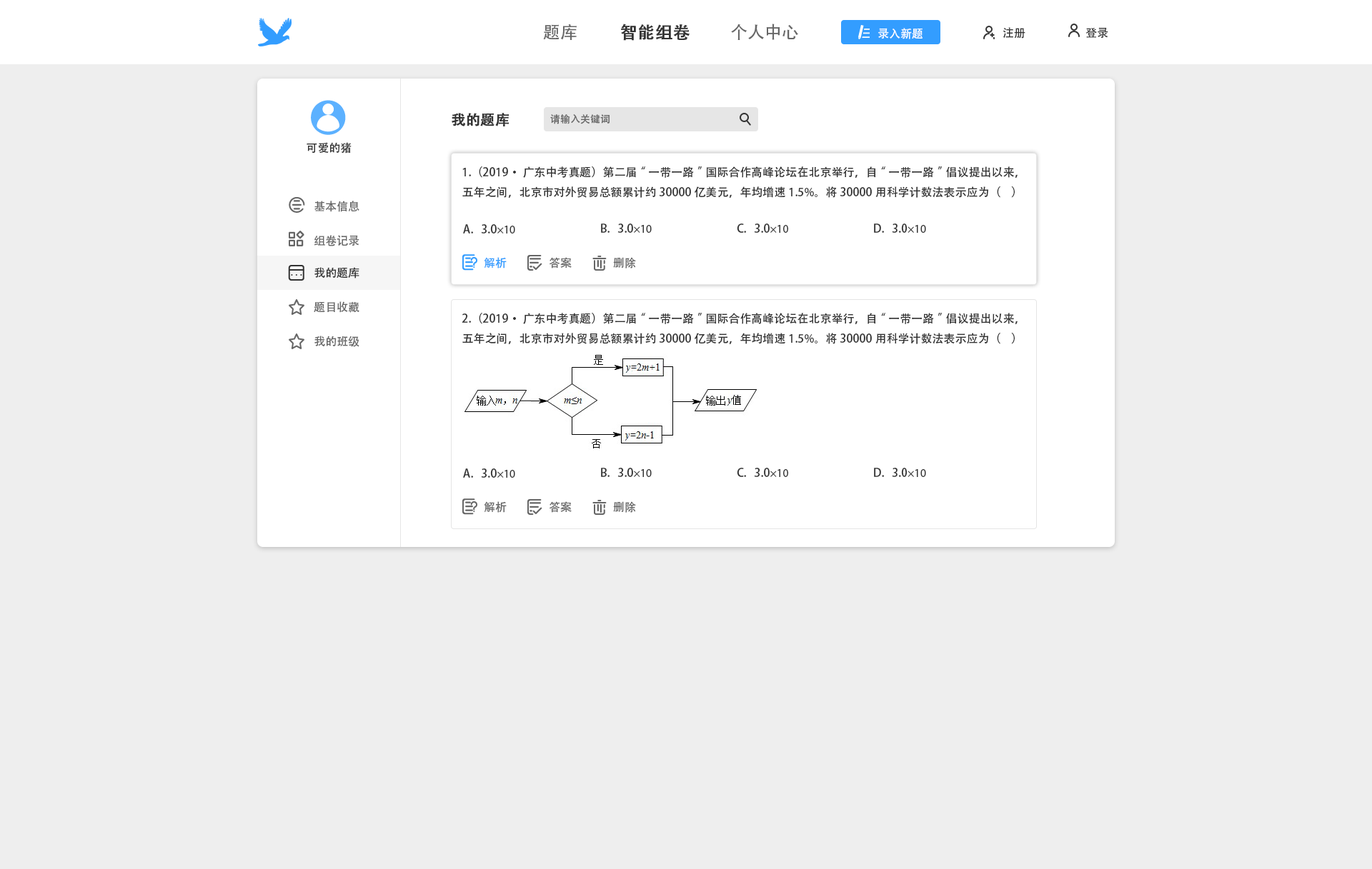
<style>
.page{position:relative;width:1372px;height:869px;background:#eeeeee}
.page>*{position:absolute;margin:0}
.t1{font:17.1px "AdobeHeitiStd-Regular";color:#666666}
.t2{font:17.1px "AdobeHeitiStd-Regular";color:#333333;font-weight:bold}
.t3{font:11.4px "AdobeHeitiStd-Regular";color:#ffffff}
.t4{font:11.4px "AdobeHeitiStd-Regular";color:#333333}
.t5{font:14.3px "AdobeHeitiStd-Regular";color:#333333;font-weight:bold}
.t6{font:10px "AdobeHeitiStd-Regular";color:#666666}
.t7{font:11.4px "AdobeHeitiStd-Regular";color:#666666}
.t8{font:11.4px "MyriadPro-Regular";color:#333333}
.t9{font:11.4px "AdobeHeitiStd-Regular";color:#339dff}
</style>
<div class="page">
<p class="t1" style="left:543px;top:24px;width:33px;height:16px">题库</p>
<p class="t2" style="left:621px;top:24px;width:68px;height:17px">智能组卷</p>
<p class="t1" style="left:731px;top:24px;width:67px;height:16px">个人中心</p>
<p class="t3" style="left:878px;top:28px;width:44px;height:11px">录入新题</p>
<p class="t4" style="left:1002px;top:27px;width:23px;height:12px">注册</p>
<p class="t4" style="left:1085px;top:27px;width:23px;height:12px">登录</p>
<p class="t5" style="left:451px;top:113px;width:58px;height:13px">我的题库</p>
<p class="t6" style="left:550px;top:114px;width:59px;height:10px">请输入关键词</p>
<p class="t4" style="left:306px;top:142px;width:45px;height:12px">可爱的猪</p>
<p class="t4" style="left:462px;top:166px;width:555px;height:32px">1.（2019·广东中考真题）第二届“一带一路”国际合作高峰论坛在北京举行，自“一带一路”倡议提出以来，五年之间，北京市对外贸易总额累计约30000亿美元，年均增速1.5%。将30000用科学计数法表示应为（    ）</p>
<p class="t7" style="left:314px;top:201px;width:45px;height:11px">基本信息</p>
<p class="t4" style="left:463px;top:224px;width:52px;height:10px">A.   3.0<span class="t8">×10</span></p>
<p class="t4" style="left:601px;top:224px;width:51px;height:9px">B.   3.0<span class="t8">×10</span></p>
<p class="t4" style="left:737px;top:224px;width:51px;height:9px">C.   3.0<span class="t8">×10</span></p>
<p class="t4" style="left:874px;top:224px;width:52px;height:9px">D.   3.0<span class="t8">×10</span></p>
<p class="t7" style="left:314px;top:235px;width:45px;height:11px">组卷记录</p>
<p class="t9" style="left:484px;top:257px;width:22px;height:12px">解析</p>
<p class="t7" style="left:549px;top:257px;width:22px;height:12px">答案</p>
<p class="t7" style="left:613px;top:257px;width:23px;height:12px">删除</p>
<p class="t4" style="left:314px;top:267px;width:45px;height:12px">我的题库</p>
<p class="t7" style="left:314px;top:301px;width:45px;height:12px">题目收藏</p>
<p class="t4" style="left:461px;top:313px;width:556px;height:31px">2.（2019·广东中考真题）第二届“一带一路”国际合作高峰论坛在北京举行，自“一带一路”倡议提出以来，五年之间，北京市对外贸易总额累计约30000亿美元，年均增速1.5%。将30000用科学计数法表示应为（    ）</p>
<p class="t7" style="left:314px;top:336px;width:45px;height:11px">我的班级</p>
<p class="t4" style="left:463px;top:469px;width:52px;height:9px">A.   3.0<span class="t8">×10</span></p>
<p class="t4" style="left:601px;top:468px;width:51px;height:9px">B.   3.0<span class="t8">×10</span></p>
<p class="t4" style="left:737px;top:468px;width:51px;height:9px">C.   3.0<span class="t8">×10</span></p>
<p class="t4" style="left:874px;top:468px;width:52px;height:9px">D.   3.0<span class="t8">×10</span></p>
<p class="t7" style="left:484px;top:501px;width:22px;height:12px">解析</p>
<p class="t7" style="left:549px;top:501px;width:22px;height:12px">答案</p>
<p class="t7" style="left:613px;top:501px;width:23px;height:12px">删除</p>
</div>
